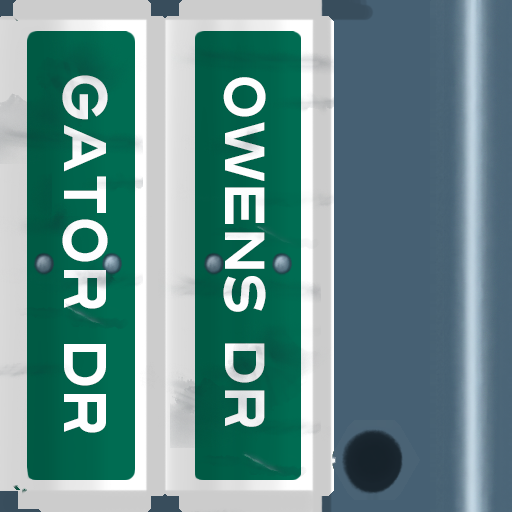
<style>
.page{position:relative;width:512px;height:512px}
.page>*{position:absolute;margin:0}
.t1{font:60px "Turnpike";color:#fefeff;scale:0.75 1}
.t2{font:56px "Turnpike";color:#fefeff;scale:0.75 1}
</style>
<div class="page">
<p class="t1" style="left:62px;top:75px;width:46px;height:358px;rotate:90deg">Gator Dr</p>
<p class="t2" style="left:223px;top:77px;width:43px;height:350px;rotate:90deg">Owens Dr</p>
</div>
